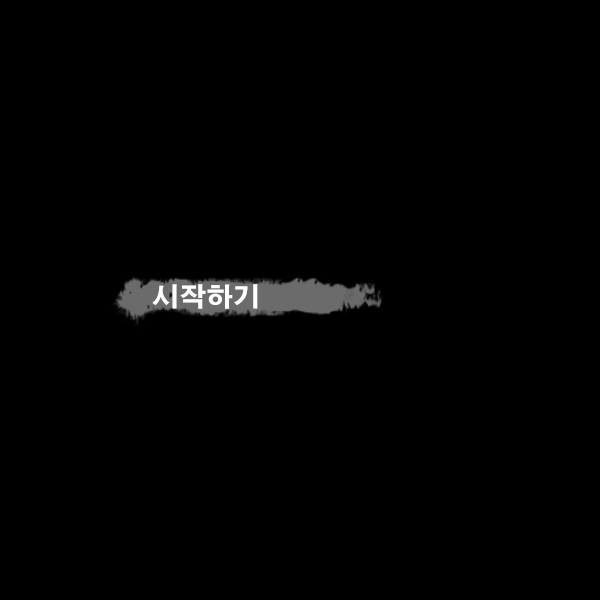
<style>
.page{position:relative;width:600px;height:600px;background:#000000}
.page>*{position:absolute;margin:0}
.t1{font:26px "HYgtrE";color:#ffffff;scale:1.04 1}
</style>
<div class="page">
<p class="t1" style="left:152px;top:284px;width:106px;height:25px">시작하기</p>
</div>
